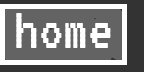
<style>
.page{position:relative;width:144px;height:72px;background:#636363}
.page>*{position:absolute;margin:0}
.t1{font:61.5px "VT323-Regular";color:#ffffff}
</style>
<div class="page">
<p class="t1" style="left:16px;top:13px;width:95px;height:35px">home</p>
</div>
